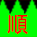
<style>
.page{position:relative;width:37px;height:37px;background:#00ff00}
.page>*{position:absolute;margin:0}
.t1{font:22.2px "MS-PGothic";color:#ff0000}
</style>
<div class="page">
<p class="t1" style="left:7px;top:15px;width:21px;height:20px">順</p>
</div>
